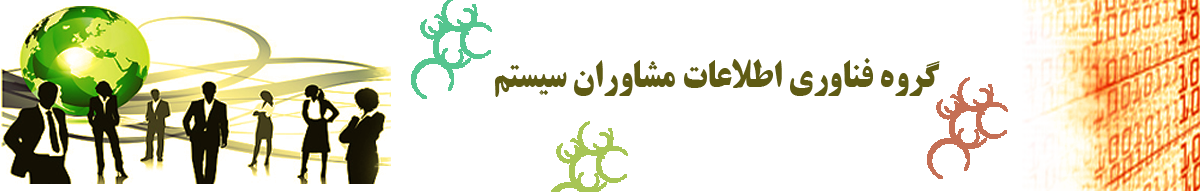
<style>
.page{position:relative;width:1200px;height:192px;background:#ffffff}
.page>*{position:absolute;margin:0}
.t1{font:37.1px "BTitrBold";color:#5f5b14;scale:0.91 1}
</style>
<div class="page">
<p class="t1" style="left:495px;top:58px;width:445px;height:39px">گروه فناوری اطلاعات مشاوران سیستم</p>
</div>
